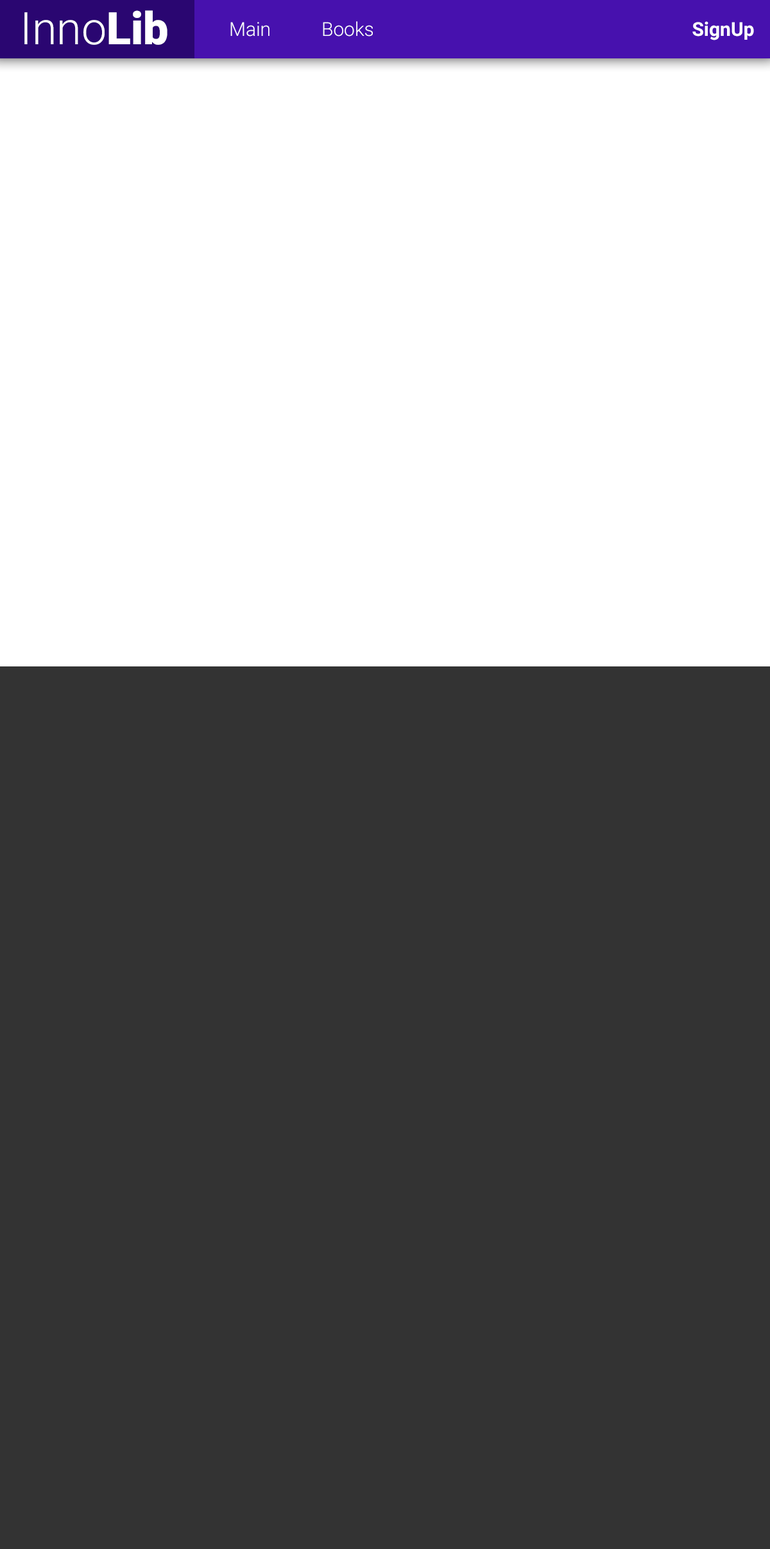
<style>
.page{position:relative;width:770px;height:1549px;background:#333333}
.page>*{position:absolute;margin:0}
.t1{font:44.9px "Roboto-Light";color:#ffffff}
.t2{font:44.9px "Roboto-Black";color:#ffffff}
.t3{font:19.2px "Roboto-Light";color:#ffffff}
.t4{font:19.2px "Roboto-Bold";color:#ffffff}
</style>
<div class="page">
<p class="t1" style="left:24px;top:10px;width:143px;height:35px">Inno<span class="t2">Lib</span></p>
<p class="t3" style="left:230px;top:21px;width:143px;height:16px">Main   Books</p>
<p class="t4" style="left:692px;top:21px;width:62px;height:19px">SignUp</p>
</div>
